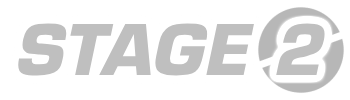
<style>
.page{position:relative;width:350px;height:100px;background:#ffffff}
.page>*{position:absolute;margin:0}
.t1{font:68px "Eurostile-BoldOblique";color:#bfbfbf}
</style>
<div class="page">
<p class="t1" style="left:18px;top:23px;width:307px;height:53px">STAGE 2</p>
</div>
